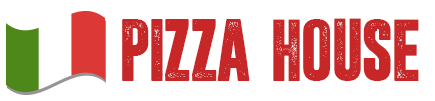
<style>
.page{position:relative;width:435px;height:101px;background:#ffffff}
.page>*{position:absolute;margin:0}
.t1{font:67.6px "Dreamwalker-BH";color:#c72727}
</style>
<div class="page">
<p class="t1" style="left:122px;top:18px;width:297px;height:63px">PIZZA HOUSE</p>
</div>
